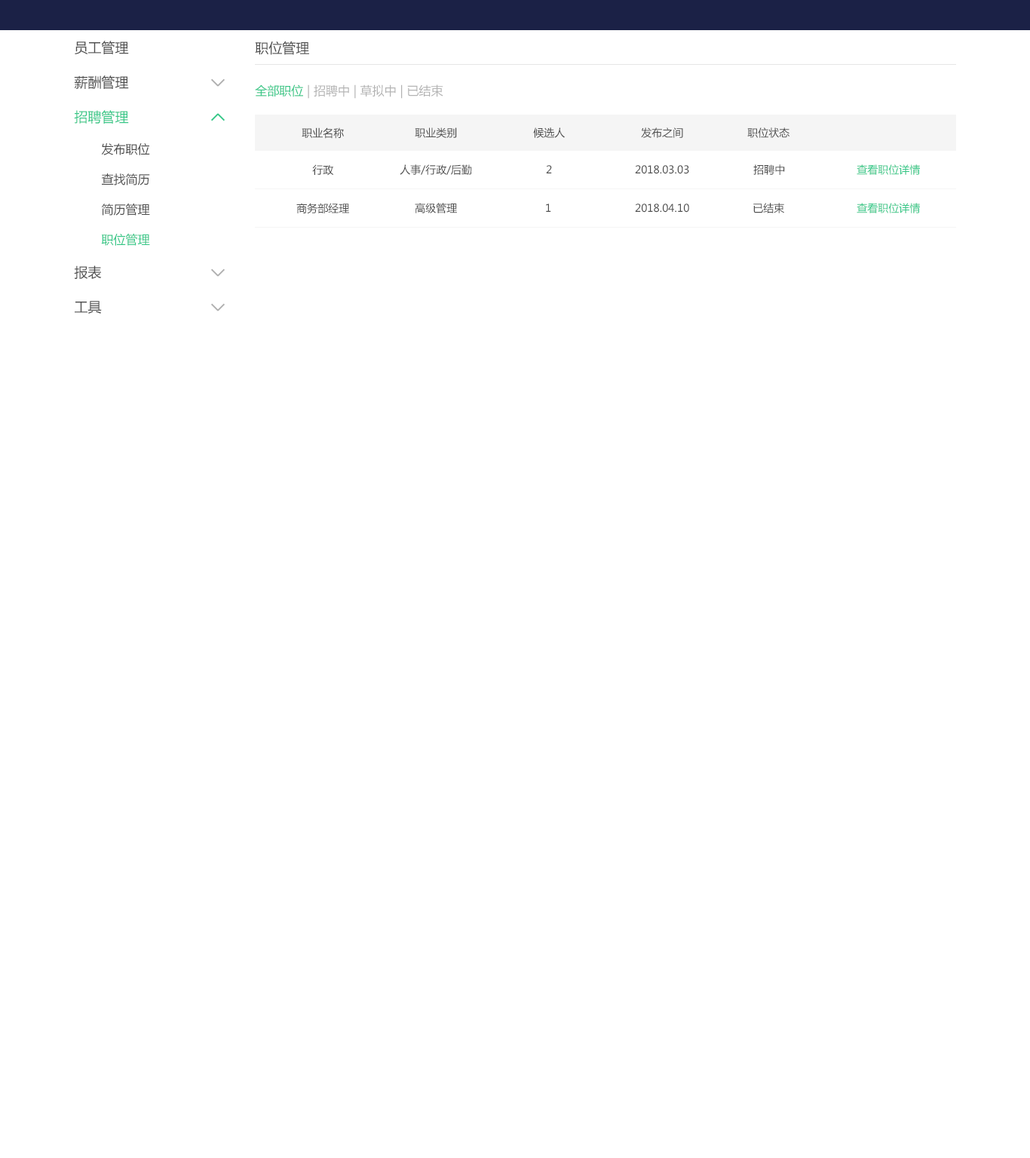
<style>
.page{position:relative;width:1030px;height:1158px;background:#ffffff}
.page>*{position:absolute;margin:0}
.t1{font:13.6px "MicrosoftYaHei";color:#4d4d4d}
.t2{font:12.1px "MicrosoftYaHei";color:#b3b3b3}
.t3{font:12.1px "MicrosoftYaHei";color:#35c787}
.t4{font:13.6px "MicrosoftYaHei";color:#35c787}
.t5{font:10.6px "MicrosoftYaHei";color:#4d4d4d}
.t6{font:10.5px "MicrosoftYaHei";color:#4d4d4d}
.t7{font:12.1px "MicrosoftYaHei";color:#4d4d4d}
.t8{font:10.5px "MicrosoftYaHei";color:#35c787}
</style>
<div class="page">
<p class="t1" style="left:75px;top:41px;width:54px;height:13px">员工管理</p>
<p class="t1" style="left:255px;top:41px;width:54px;height:14px">职位管理</p>
<p class="t1" style="left:74px;top:75px;width:55px;height:14px">薪酬管理</p>
<p class="t2" style="left:255px;top:84px;width:188px;height:15px"><span class="t3">全部职位</span> | 招聘中 | 草拟中 | 已结束</p>
<p class="t4" style="left:74px;top:110px;width:55px;height:14px">招聘管理</p>
<p class="t5" style="left:302px;top:127px;width:42px;height:12px">职业名称</p>
<p class="t6" style="left:415px;top:127px;width:42px;height:11px">职业类别</p>
<p class="t6" style="left:533px;top:127px;width:32px;height:11px">候选人</p>
<p class="t6" style="left:641px;top:127px;width:42px;height:11px">发布之间</p>
<p class="t6" style="left:747px;top:127px;width:42px;height:11px">职位状态</p>
<p class="t7" style="left:101px;top:143px;width:49px;height:12px">发布职位</p>
<p class="t7" style="left:101px;top:173px;width:49px;height:12px">查找简历</p>
<p class="t5" style="left:312px;top:164px;width:22px;height:12px">行政</p>
<p class="t6" style="left:400px;top:164px;width:72px;height:11px">人事/行政/后勤</p>
<p class="t6" style="left:546px;top:165px;width:6px;height:8px">2</p>
<p class="t6" style="left:635px;top:165px;width:54px;height:9px">2018.03.03</p>
<p class="t6" style="left:753px;top:164px;width:32px;height:11px">招聘中</p>
<p class="t8" style="left:856px;top:164px;width:64px;height:11px">查看职位详情</p>
<p class="t7" style="left:101px;top:204px;width:49px;height:12px">简历管理</p>
<p class="t6" style="left:296px;top:203px;width:53px;height:11px">商务部经理</p>
<p class="t6" style="left:415px;top:203px;width:42px;height:10px">高级管理</p>
<p class="t6" style="left:546px;top:204px;width:5px;height:8px">1</p>
<p class="t6" style="left:635px;top:204px;width:54px;height:9px">2018.04.10</p>
<p class="t6" style="left:753px;top:203px;width:31px;height:10px">已结束</p>
<p class="t8" style="left:856px;top:203px;width:64px;height:10px">查看职位详情</p>
<p class="t3" style="left:101px;top:234px;width:49px;height:12px">职位管理</p>
<p class="t1" style="left:74px;top:265px;width:28px;height:14px">报表</p>
<p class="t1" style="left:75px;top:301px;width:27px;height:13px">工具</p>
</div>
